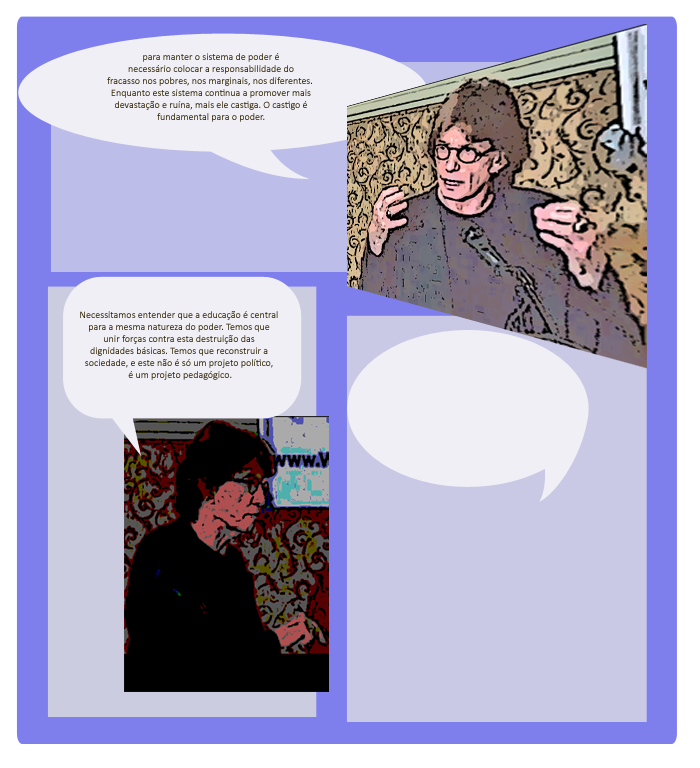
<style>
.page{position:relative;width:700px;height:768px}
.page>*{position:absolute;margin:0}
.t1{font:10px "Calibri";color:#332605}
</style>
<div class="page">
<p class="t1" style="left:107px;top:53px;width:205px;height:69px;text-align:center">para manter o sistema de poder é <br>necessário colocar a responsabilidade do <br>fracasso nos pobres, nos marginais, nos diferentes.  <br>Enquanto este sistema continua a promover mais <br>devastação e ruína, mais ele castiga. O castigo é <br>fundamental para o poder.</p>
<p class="t1" style="left:80px;top:311px;width:198px;height:69px;text-align:center">Necessitamos entender que a educação é central <br>para a mesma natureza do poder. Temos que <br>unir forças contra esta destruição das <br>dignidades básicas. Temos que reconstruir a <br>sociedade, e este não é só um projeto político, <br>é um projeto pedagógico.</p>
</div>
